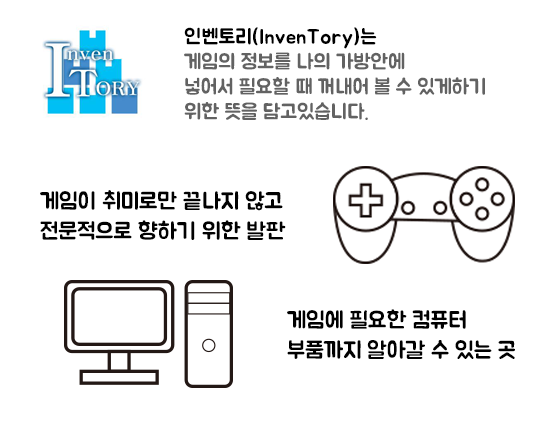
<style>
.page{position:relative;width:543px;height:439px;background:#ffffff}
.page>*{position:absolute;margin:0}
.t1{font:20.8px/25px "BMJUA";color:#626262}
.t2{font:20.8px/25px "BMJUA";color:#000000}
.t3{font:23px/30px "BMJUA";color:#010101}
.t4{font:23px/30px "BMJUA";color:#000000}
</style>
<div class="page">
<p class="t1" style="left:184px;top:27px;width:301px;height:93px"><span class="t2">인벤토리(InvenTory)는<br></span>게임의 정보를 나의 가방안에 <br>넣어서 필요할 때 꺼내어 볼 수 있게하기<br>위한 뜻을 담고있습니다.</p>
<p class="t3" style="left:40px;top:190px;width:246px;height:50px">게임이 취미로만 끝나지 않고<br>전문적으로 향하기 위한 발판</p>
<p class="t4" style="left:287px;top:309px;width:228px;height:50px">게임에 필요한 컴퓨터 <br>부품까지 알아갈 수 있는 곳</p>
</div>
